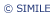
<style>
.page{position:relative;width:55px;height:17px;background:#ffffff}
.page>*{position:absolute;margin:0}
.t1{font:10px "Verdana";letter-spacing:-0.025em;color:#253a7a}
</style>
<div class="page">
<p class="t1" style="left:4px;top:4px;width:46px;height:9px">© SIMILE</p>
</div>
